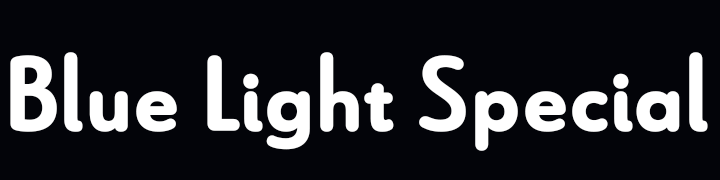
<style>
.page{position:relative;width:720px;height:180px;background:#030409}
.page>*{position:absolute;margin:0}
.t1{font:104.7px "LeHavreRoundedBold";color:#ffffff;font-weight:bold}
</style>
<div class="page">
<p class="t1" style="left:10px;top:52px;width:698px;height:99px">Blue Light Special</p>
</div>
